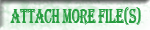
<style>
.page{position:relative;width:150px;height:30px}
.page>*{position:absolute;margin:0}
.t1{font:21px "Algerian";letter-spacing:-0.025em;color:#269c3f;scale:0.62 1}
</style>
<div class="page">
<p class="t1" style="left:10px;top:7px;width:131px;height:18px">ATTACH MORE FILE(S)</p>
</div>
